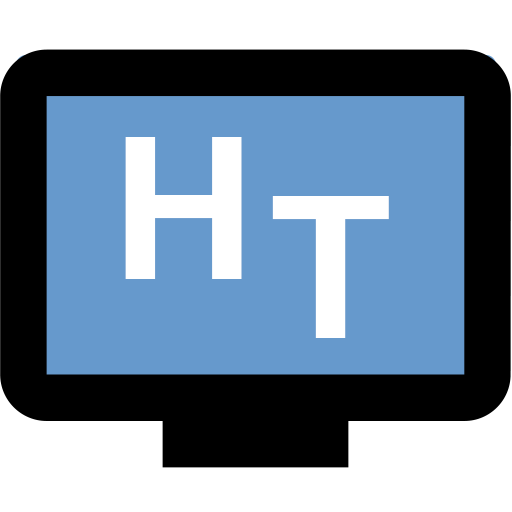
<style>
.page{position:relative;width:512px;height:512px;background:#6699cc}
.page>*{position:absolute;margin:0}
.t1{font:200px "Roboto-Bold";color:#ffffff}
</style>
<div class="page">
<p class="t1" style="left:125px;top:137px;width:117px;height:142px">H</p>
<p class="t1" style="left:272px;top:196px;width:117px;height:142px">T</p>
</div>
